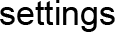
<style>
.page{position:relative;width:115px;height:32px;background:#ffffff}
.page>*{position:absolute;margin:0}
.t1{font:34px "ArialMT";color:#000000}
</style>
<div class="page">
<p class="t1" style="left:0px;top:0px;width:115px;height:32px">settings</p>
</div>
